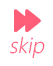
<style>
.page{position:relative;width:53px;height:66px;background:#ffffff}
.page>*{position:absolute;margin:0}
.t1{font:21.8px "SegoeUI-Light";color:#ff5e79;font-style:italic}
</style>
<div class="page">
<p class="t1" style="left:10px;top:36px;width:35px;height:23px">skip</p>
</div>
